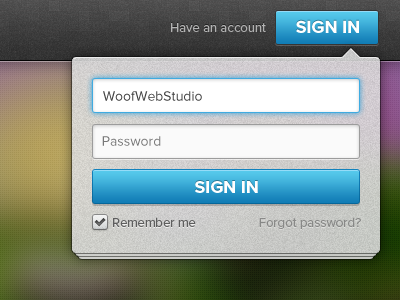
<style>
.page{position:relative;width:400px;height:300px}
.page>*{position:absolute;margin:0}
.t1{font:13px "ProximaNova-Regular";color:#b2b2b2}
.t2{font:18px "ProximaNova-Bold";color:#ffffff;text-transform:uppercase}
.t3{font:14px "ProximaNova-Regular";color:#404040}
.t4{font:14px "ProximaNova-Regular";color:#777777}
.t5{font:13px "ProximaNova-Regular";color:#5e5e5e}
.t6{font:13px "ProximaNova-Regular";color:#888887}
</style>
<div class="page">
<p class="t1" style="left:171px;top:23px;width:95px;height:9px">Have an account</p>
<p class="t2" style="left:296px;top:20px;width:63px;height:13px">Sign In</p>
<p class="t3" style="left:103px;top:91px;width:99px;height:10px">WoofWebStudio</p>
<p class="t4" style="left:102px;top:136px;width:59px;height:10px">Password</p>
<p class="t2" style="left:195px;top:181px;width:63px;height:12px">Sign In</p>
<p class="t5" style="left:113px;top:217px;width:83px;height:10px">Remember me</p>
<p class="t6" style="left:259px;top:217px;width:102px;height:12px">Forgot password?</p>
</div>
